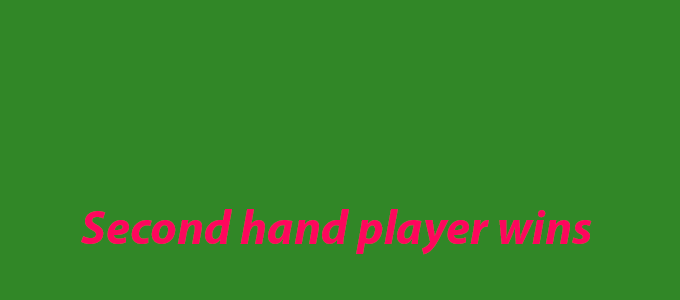
<style>
.page{position:relative;width:680px;height:300px;background:#318727}
.page>*{position:absolute;margin:0}
.t1{font:48px "MyriadPro-BoldIt";color:#fd075d}
</style>
<div class="page">
<p class="t1" style="left:81px;top:209px;width:511px;height:46px">Second hand player wins</p>
</div>
